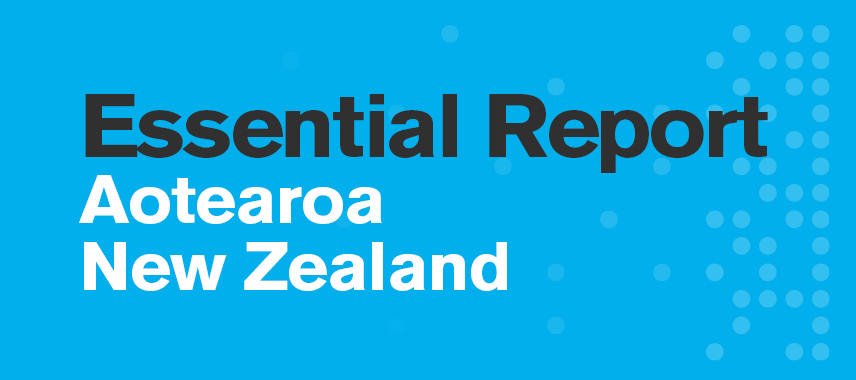
<style>
.page{position:relative;width:856px;height:380px;background:#00afec}
.page>*{position:absolute;margin:0}
.t1{font:88.7px "AkzidenzGroteskBE-Bold";letter-spacing:-0.04em;color:#303031;scale:1.06 1}
.t2{font:88.7px "AkzidenzGroteskBE-Bold";letter-spacing:-0.02em;color:#303031;scale:1.06 1}
.t3{font:88.7px "AkzidenzGroteskBE-Bold";letter-spacing:-0.06em;color:#303031;scale:1.06 1}
.t4{font:67.4px/60px "AkzidenzGroteskBE-Bold";letter-spacing:-0.02em;color:#ffffff;scale:1.06 1}
</style>
<div class="page">
<p class="t1" style="left:85px;top:94px;width:683px;height:79px">E<span class="t2">ss</span><span class="t3">e</span>n<span class="t2">t</span><span class="t3">i</span>al R<span class="t3">e</span>po<span class="t2">r</span>t</p>
<p class="t4" style="left:79px;top:175px;width:428px;height:116px">Aotearoa<br>New Zealand</p>
</div>
